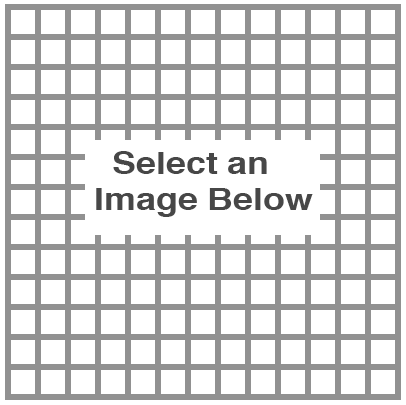
<style>
.page{position:relative;width:406px;height:405px;background:#ffffff}
.page>*{position:absolute;margin:0}
.t1{font:29.9px "Helvetica-Bold";color:#474747;scale:1.2 1}
.t2{font:29.9px "TimesNewRomanPS-BoldMT";color:#474747;scale:1.2 1}
</style>
<div class="page">
<p class="t1" style="left:96px;top:151px;width:217px;height:66px"><span class="t2">  </span>Select an<br>Image Below</p>
</div>
